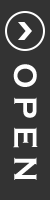
<style>
.page{position:relative;width:50px;height:200px;background:#333333}
.page>*{position:absolute;margin:0}
.t1{font:33.3px "CopperplateGothic-Bold";letter-spacing:0.26em;color:#ffffff;scale:0.88 1}
</style>
<div class="page">
<p class="t1" style="left:13px;top:64px;width:25px;height:116px;rotate:90deg">OPEN</p>
</div>
